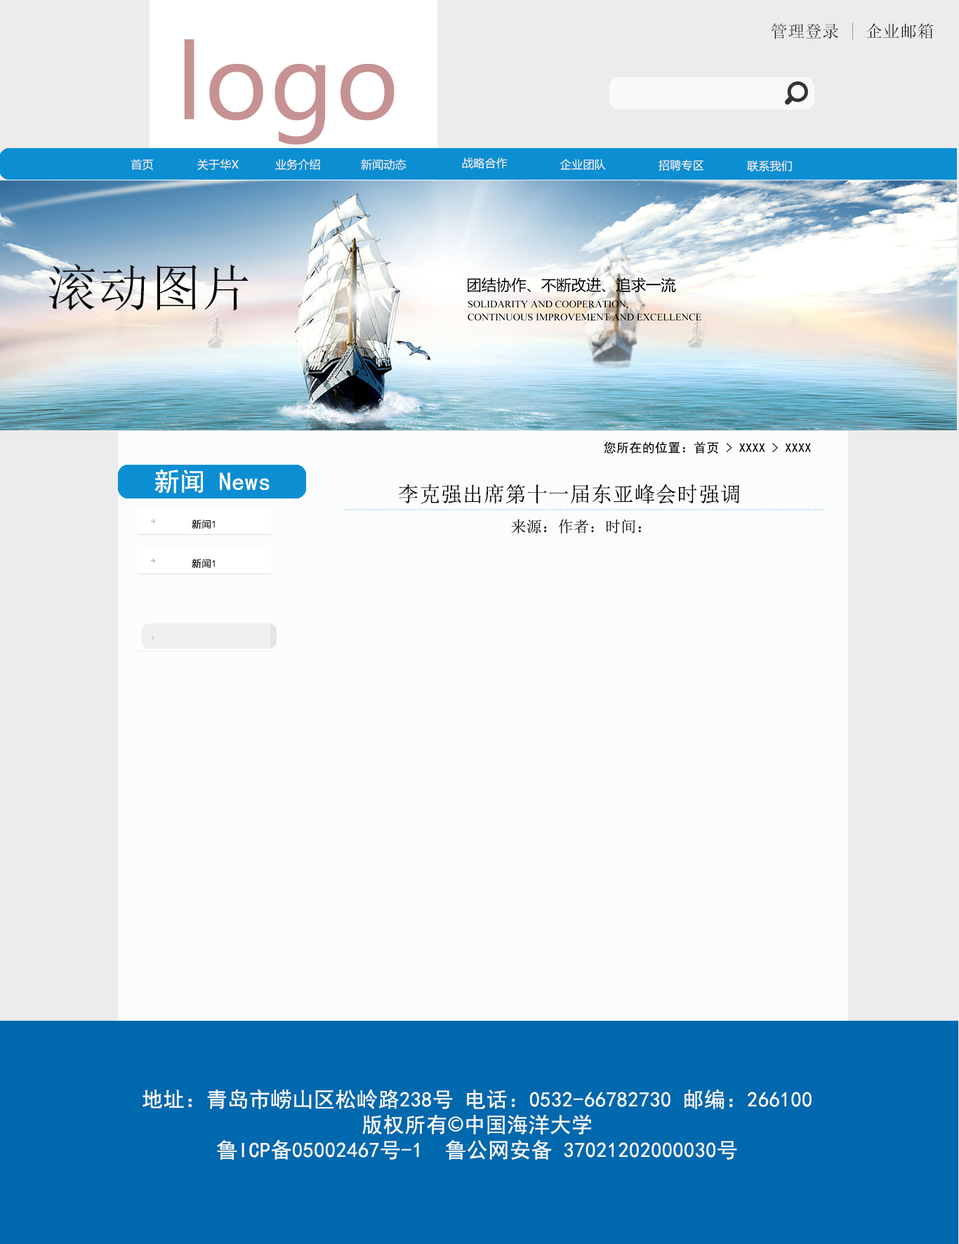
<style>
.page{position:relative;width:959px;height:1244px;background:#fbfdfd}
.page>*{position:absolute;margin:0}
.t1{font:16.8px "SimSun";letter-spacing:0.02em;color:#090808}
.t2{font:99.7px "MicrosoftYaHei";letter-spacing:0.02em;color:#c69292}
.t3{font:11.2px "MicrosoftYaHei";letter-spacing:0.02em;color:#f9f3f3}
.t4{font:11.2px "MicrosoftYaHei";letter-spacing:0.02em;color:#faf5f5}
.t5{font:50.5px "SimSun";letter-spacing:0.02em;color:#090808}
.t6{font:12.6px "SimHei";letter-spacing:0.02em;color:#060606}
.t7{font:25.3px "SimHei";letter-spacing:0.02em;color:#fdffff}
.t8{font:25.3px "SimHei";letter-spacing:0.02em;color:#080808}
.t9{font:21.1px "SimSun";letter-spacing:0.02em;color:#080808}
.t10{font:9.8px "SimHei";letter-spacing:0.02em;color:#080808}
.t11{font:15.4px "SimSun";letter-spacing:0.02em;color:#080808}
.t12{font:21.1px/12.6px "SimHei";letter-spacing:0.02em;color:#fafafc}
.t13{font:21.1px/12.6px "AdobeHeitiStd-Regular";letter-spacing:0.02em;color:#fafafc}
</style>
<div class="page">
<p class="t1" style="left:771px;top:22px;width:162px;height:18px">管理登录 | 企业邮箱</p>
<p class="t2" style="left:184px;top:39px;width:210px;height:106px">logo</p>
<p class="t3" style="left:131px;top:159px;width:22px;height:12px">首页</p>
<p class="t4" style="left:197px;top:159px;width:42px;height:12px">关于华X</p>
<p class="t4" style="left:275px;top:159px;width:45px;height:12px">业务介绍</p>
<p class="t4" style="left:361px;top:159px;width:45px;height:12px">新闻动态</p>
<p class="t4" style="left:462px;top:157px;width:45px;height:11px">战略合作</p>
<p class="t4" style="left:560px;top:159px;width:46px;height:11px">企业团队</p>
<p class="t4" style="left:658px;top:159px;width:45px;height:12px">招聘专区</p>
<p class="t4" style="left:747px;top:160px;width:45px;height:12px">联系我们</p>
<p class="t5" style="left:48px;top:263px;width:200px;height:48px">滚动图片</p>
<p class="t6" style="left:604px;top:441px;width:207px;height:12px">您所在的位置：首页 &gt; XXXX &gt; XXXX</p>
<p class="t7" style="left:154px;top:469px;width:116px;height:24px"><span class="t8"><br></span>新闻 News</p>
<p class="t9" style="left:399px;top:484px;width:341px;height:20px">李克强出席第十一届东亚峰会时强调</p>
<p class="t10" style="left:192px;top:519px;width:23px;height:10px">新闻1</p>
<p class="t11" style="left:511px;top:519px;width:130px;height:14px">来源：作者：时间：</p>
<p class="t10" style="left:192px;top:559px;width:23px;height:10px">新闻1</p>
<p class="t12" style="left:142px;top:1089px;width:669px;height:70px;text-align:center">地址：青岛市崂山区松岭路238号 电话：0532-66782730 邮编：266100 <br><br>版权所有<span class="t13">©</span>中国海洋大学 <br><br>鲁ICP备05002467号-1  鲁公网安备 37021202000030号</p>
</div>
